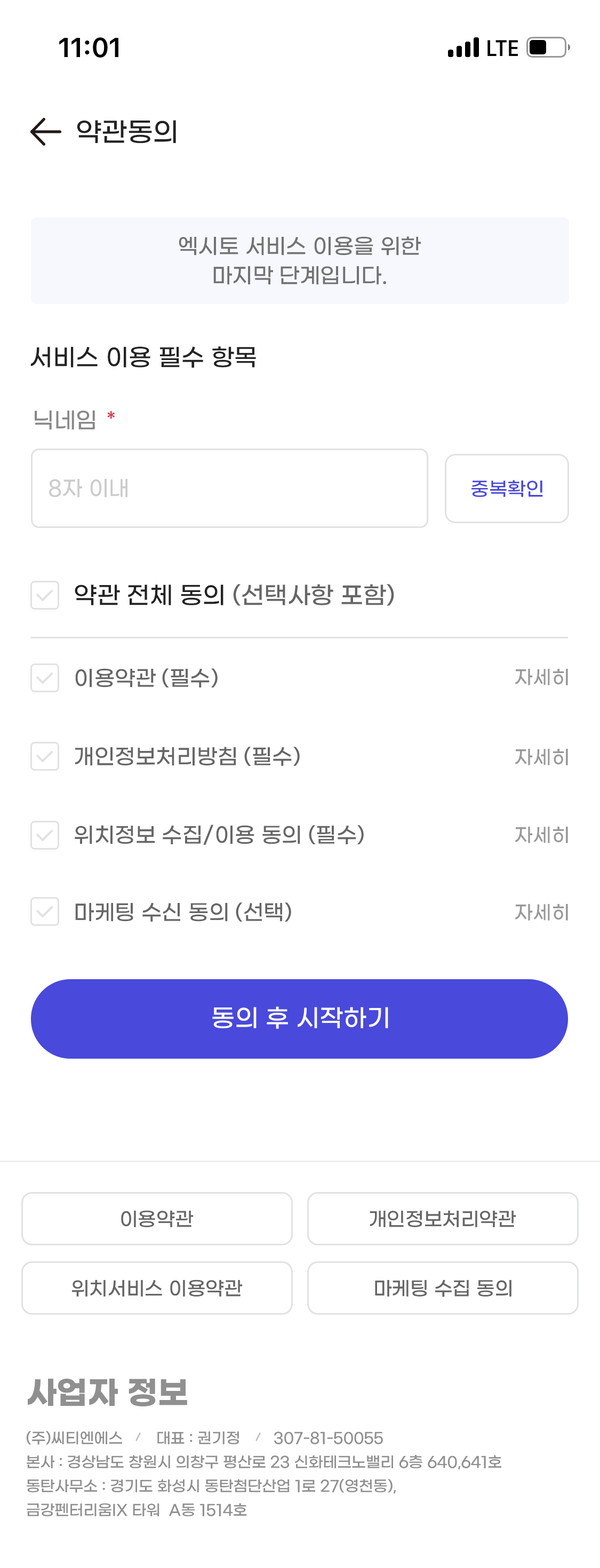
<style>
.page{position:relative;width:600px;height:1568px;background:#ffffff}
.page>*{position:absolute;margin:0}
.t1{font:26.7px "GmarketSansMedium";color:#222222}
.t2{font:21.3px/29.3px "GmarketSansMedium";color:#727272}
.t3{font:24px "GmarketSansMedium";color:#222222}
.t4{font:22.4px "GmarketSansMedium";color:#888888}
.t5{font:21.3px "GmarketSansMedium";color:#d43d4e}
.t6{font:21.3px "GmarketSansMedium";color:#cccccc}
.t7{font:19.2px "GmarketSansMedium";color:#4949db}
.t8{font:24px "GmarketSansMedium";color:#666666}
.t9{font:21.3px "GmarketSansMedium";color:#666666}
.t10{font:19.2px "GmarketSansMedium";color:#999999}
.t11{font:24.5px "GmarketSansMedium";color:#ffffff}
.t12{font:19.2px "GmarketSansMedium";color:#666666}
.t13{font:32px "GmarketSansBold";color:#909090}
.t14{font:14.9px/24px "GmarketSansMedium";color:#909090}
</style>
<div class="page">
<p class="t1" style="left:77px;top:120px;width:99px;height:23px">약관동의</p>
<p class="t2" style="left:179px;top:236px;width:242px;height:49px;text-align:center">엑시토 서비스 이용을 위한<br>마지막 단계입니다.</p>
<p class="t3" style="left:30px;top:346px;width:226px;height:22px">서비스 이용 필수 항목</p>
<p class="t4" style="left:35px;top:410px;width:60px;height:20px">닉네임</p>
<p class="t5" style="left:107px;top:411px;width:8px;height:8px">*</p>
<p class="t6" style="left:49px;top:479px;width:78px;height:19px">8자 이내</p>
<p class="t7" style="left:471px;top:480px;width:72px;height:17px">중복확인</p>
<p class="t8" style="left:75px;top:584px;width:319px;height:22px"><span class="t3">약관 전체 동의 </span>(선택사항 포함)</p>
<p class="t9" style="left:75px;top:668px;width:143px;height:19px">이용약관 (필수)</p>
<p class="t10" style="left:515px;top:669px;width:53px;height:16px">자세히</p>
<p class="t9" style="left:75px;top:747px;width:225px;height:19px">개인정보처리방침 (필수)</p>
<p class="t10" style="left:515px;top:749px;width:53px;height:16px">자세히</p>
<p class="t9" style="left:75px;top:825px;width:289px;height:20px">위치정보 수집/이용 동의 (필수)</p>
<p class="t10" style="left:515px;top:827px;width:53px;height:16px">자세히</p>
<p class="t9" style="left:75px;top:902px;width:216px;height:20px">마케팅 수신 동의 (선택)</p>
<p class="t10" style="left:515px;top:904px;width:53px;height:17px">자세히</p>
<p class="t11" style="left:212px;top:1006px;width:176px;height:23px">동의 후 시작하기</p>
<p class="t12" style="left:121px;top:1210px;width:73px;height:17px">이용약관</p>
<p class="t12" style="left:370px;top:1210px;width:146px;height:17px">개인정보처리약관</p>
<p class="t12" style="left:72px;top:1279px;width:171px;height:18px">위치서비스 이용약관</p>
<p class="t12" style="left:375px;top:1279px;width:136px;height:18px">마케팅 수집 동의</p>
<p class="t13" style="left:28px;top:1379px;width:159px;height:27px">사업자 정보</p>
<p class="t14" style="left:26px;top:1431px;width:475px;height:85px">(주)씨티엔에스        대표 : 권기정        307-81-50055<br>본사 : 경상남도 창원시 의창구 평산로 23 신화테크노밸리 6층 640,641호<br>동탄사무소 : 경기도 화성시 동탄첨단산업 1로 27(영천동),<br>금강펜터리움IX 타워  A동 1514호</p>
</div>
